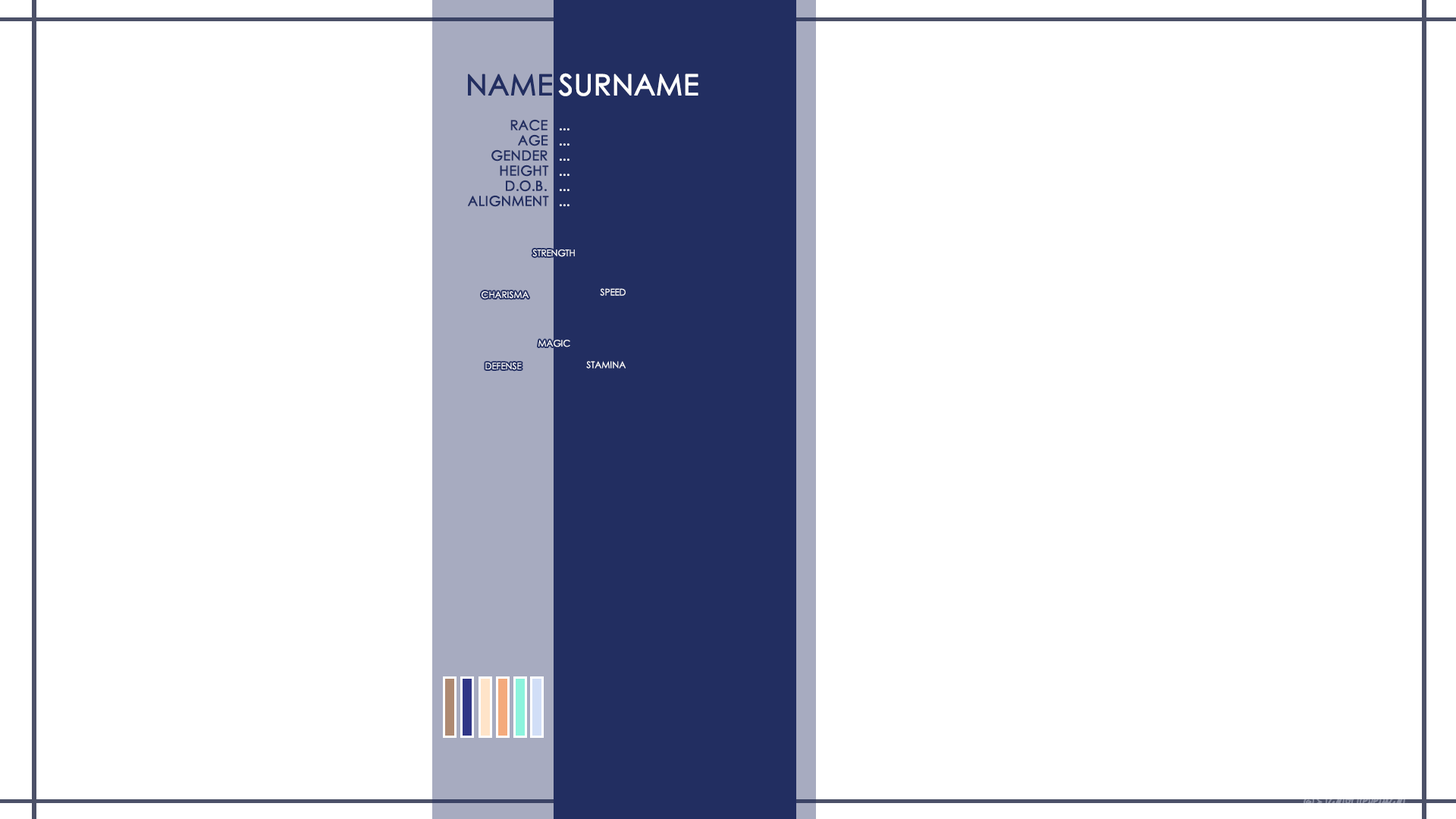
<style>
.page{position:relative;width:1456px;height:819px;background:#ffffff}
.page>*{position:absolute;margin:0}
.t1{font:28.8px "CenturyGothic";color:#222e61;font-weight:bold}
.t2{font:28.8px "CenturyGothic";color:#ffffff;font-weight:bold}
.t3{font:13.6px/15.2px "CenturyGothic";color:#222e61;font-weight:bold}
.t4{font:13.6px/15.2px "CenturyGothic";color:#ffffff;font-weight:bold}
.t5{font:9.1px "CenturyGothic";color:#ffffff}
</style>
<div class="page">
<p class="t1" style="left:468px;top:74px;width:84px;height:22px">NAME</p>
<p class="t2" style="left:558px;top:73px;width:140px;height:23px">SURNAME</p>
<p class="t3" style="left:467px;top:119px;width:82px;height:88px;text-align:right">RACE<br>AGE <br>GENDER<br>HEIGHT<br>D.O.B.<br>ALIGNMENT</p>
<p class="t4" style="left:560px;top:128px;width:10px;height:78px">...<br>...<br>...<br>...<br>...<br>...</p>
<p class="t5" style="left:532px;top:249px;width:43px;height:8px">STRENGTH</p>
<p class="t5" style="left:482px;top:291px;width:47px;height:8px">CHARISMA</p>
<p class="t5" style="left:600px;top:288px;width:26px;height:8px">SPEED</p>
<p class="t5" style="left:538px;top:340px;width:32px;height:7px">MAGIC</p>
<p class="t5" style="left:485px;top:362px;width:37px;height:8px">DEFENSE</p>
<p class="t5" style="left:586px;top:361px;width:40px;height:8px">STAMINA</p>
</div>
